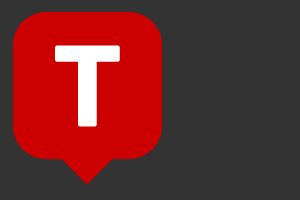
<style>
.page{position:relative;width:300px;height:200px;background:#333333}
.page>*{position:absolute;margin:0}
.t1{font:109px "Arial-BoldMT";color:#ffffff;font-weight:bold}
</style>
<div class="page">
<p class="t1" style="left:55px;top:45px;width:65px;height:82px">T</p>
</div>
